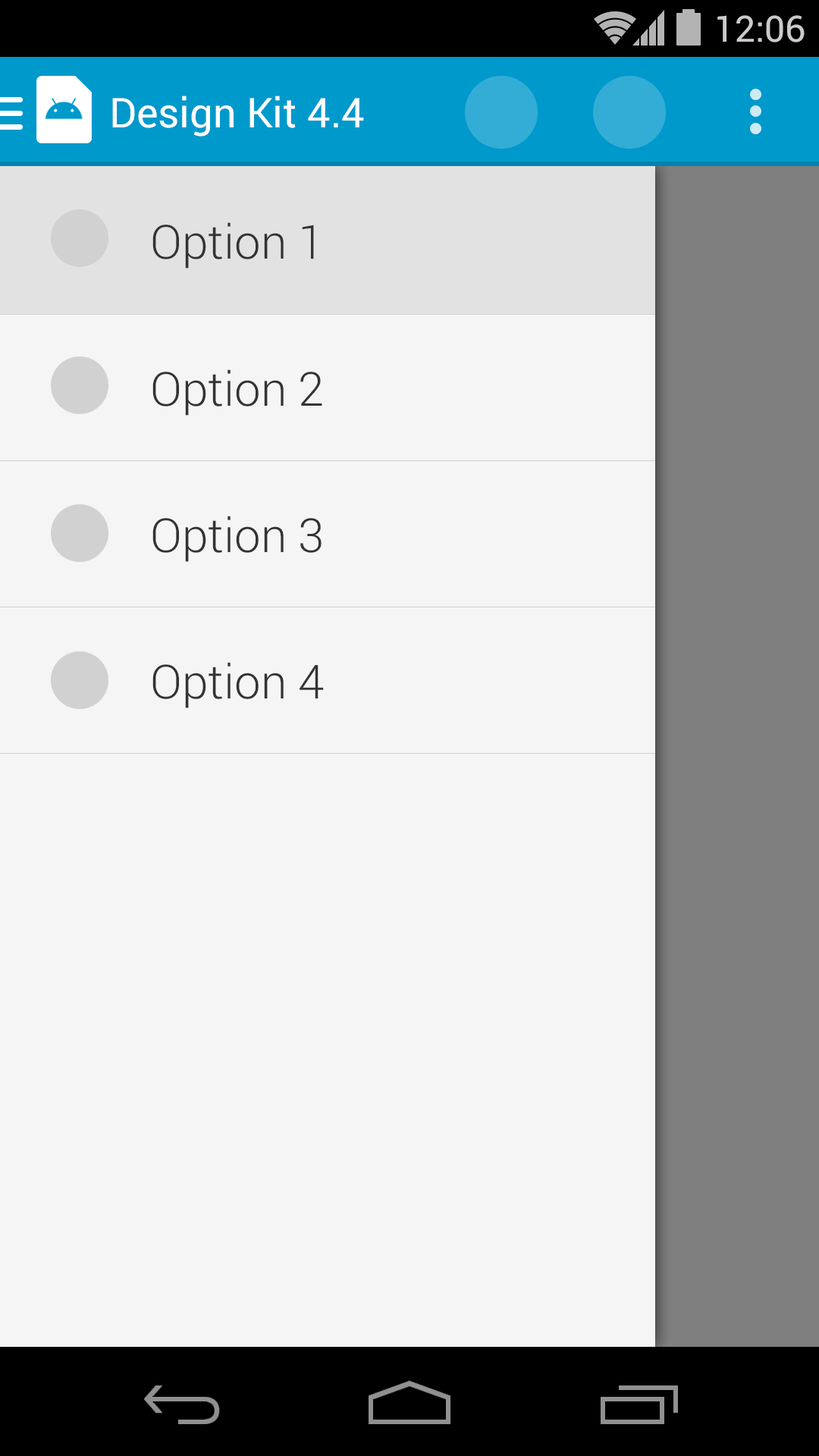
<style>
.page{position:relative;width:819px;height:1456px;background:#f5f5f5}
.page>*{position:absolute;margin:0}
.t1{font:36.4px "Roboto-Regular";color:#cbcbcb}
.t2{font:40.9px "Roboto-Regular";color:#ffffff}
.t3{font:47px "Roboto-Light";color:#333333}
</style>
<div class="page">
<p class="t1" style="left:717px;top:15px;width:88px;height:27px">12:06</p>
<p class="t2" style="left:112px;top:96px;width:252px;height:40px">Design Kit 4.4</p>
<p class="t3" style="left:152px;top:222px;width:162px;height:46px">Option 1</p>
<p class="t3" style="left:152px;top:369px;width:170px;height:47px">Option 2</p>
<p class="t3" style="left:152px;top:516px;width:170px;height:46px">Option 3</p>
<p class="t3" style="left:152px;top:662px;width:172px;height:46px">Option 4</p>
</div>
